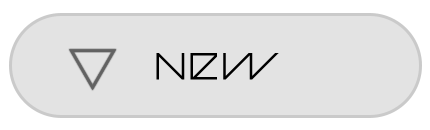
<style>
.page{position:relative;width:430px;height:130px;background:#e3e3e3}
.page>*{position:absolute;margin:0}
.t1{font:77px "AuricomRegular";letter-spacing:0.05em;color:#000000}
</style>
<div class="page">
<p class="t1" style="left:156px;top:53px;width:123px;height:27px">new</p>
</div>
